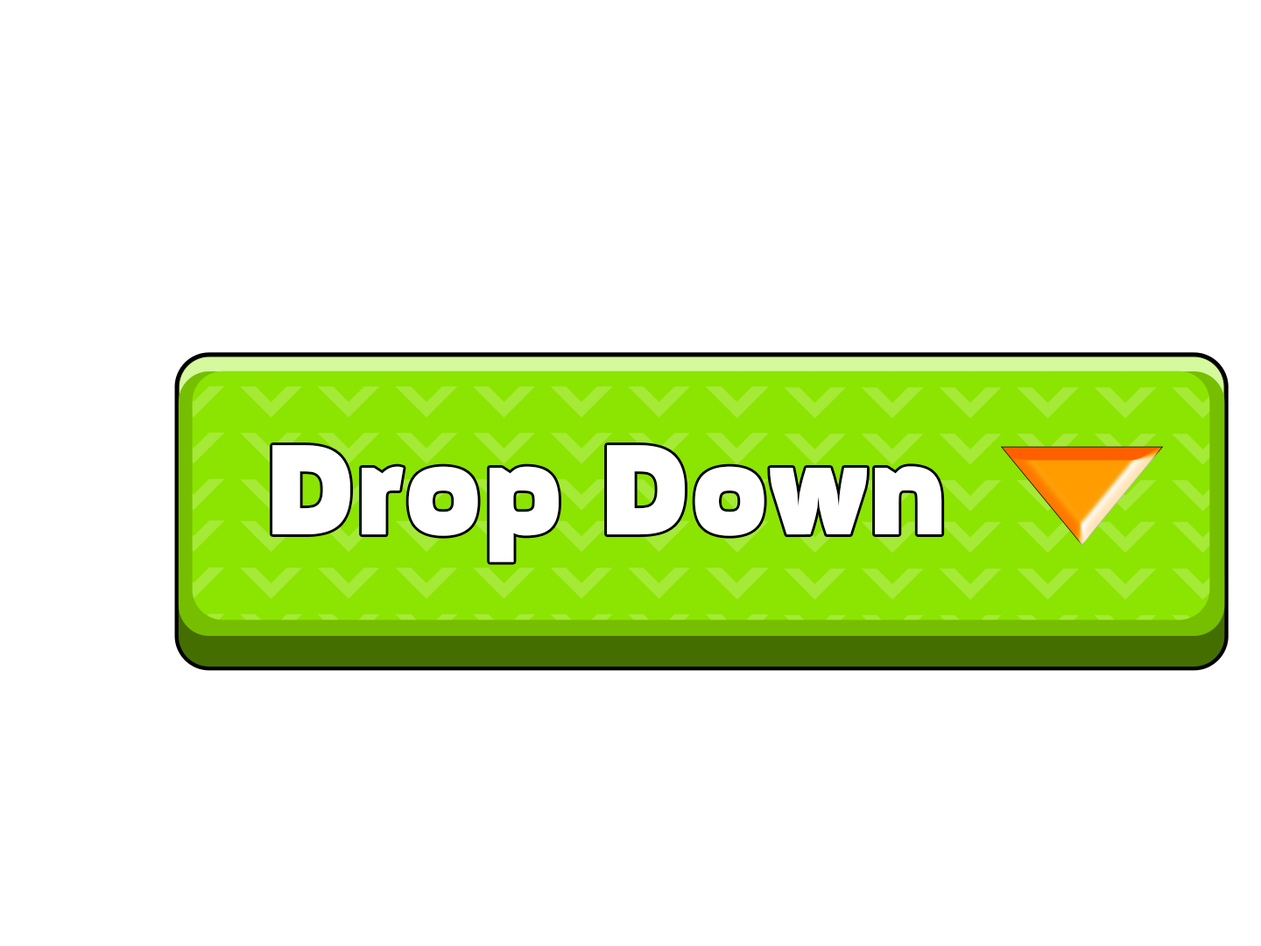
<style>
.page{position:relative;width:1261px;height:946px;background:#ffffff}
.page>*{position:absolute;margin:0}
.t1{font:125.5px "MovaviGrotesqueBlack";color:#ffffff}
</style>
<div class="page">
<p class="t1" style="left:272px;top:445px;width:670px;height:117px">Drop Down</p>
</div>
